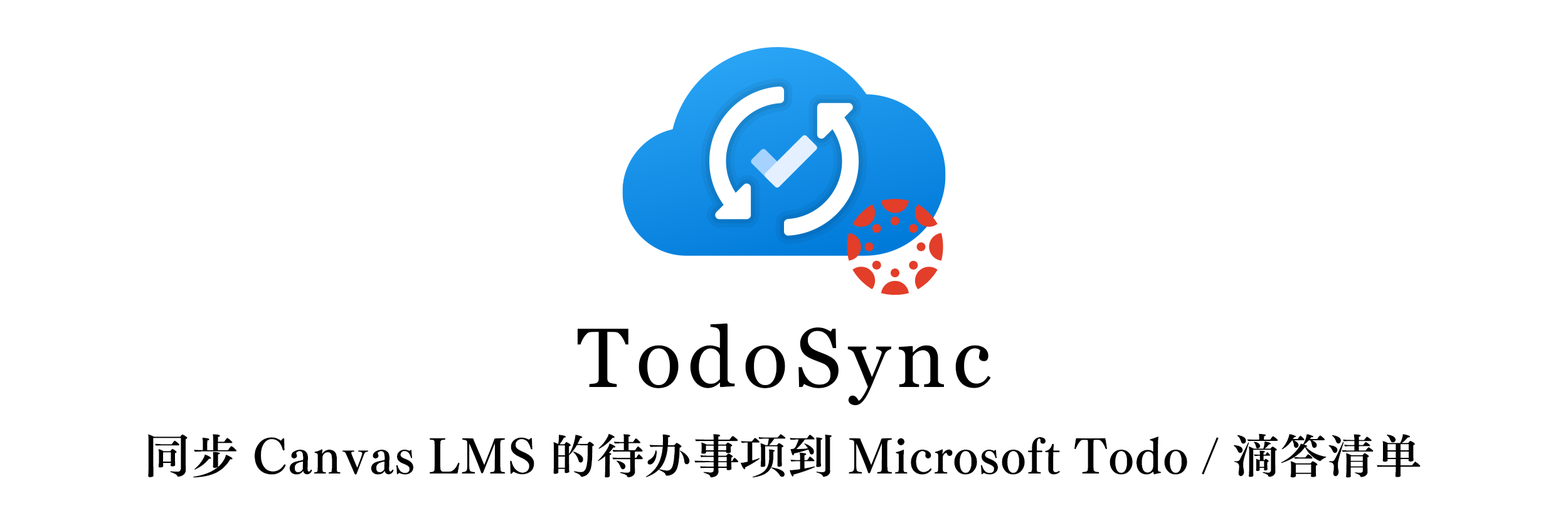
<style>
.page{position:relative;width:1568px;height:508px;background:#ffffff}
.page>*{position:absolute;margin:0}
.t1{font:83.9px "Georgia";letter-spacing:0.08em;color:#000000}
.t2{font:47px "FZFW-ZhuZiMinchoS-B--GB1-0";letter-spacing:0.01em;color:#000000}
</style>
<div class="page">
<p class="t1" style="left:577px;top:323px;width:414px;height:83px">TodoSync</p>
<p class="t2" style="left:148px;top:433px;width:1273px;height:45px">同步 Canvas LMS 的待办事项到 Microsoft Todo / 滴答清单</p>
</div>
